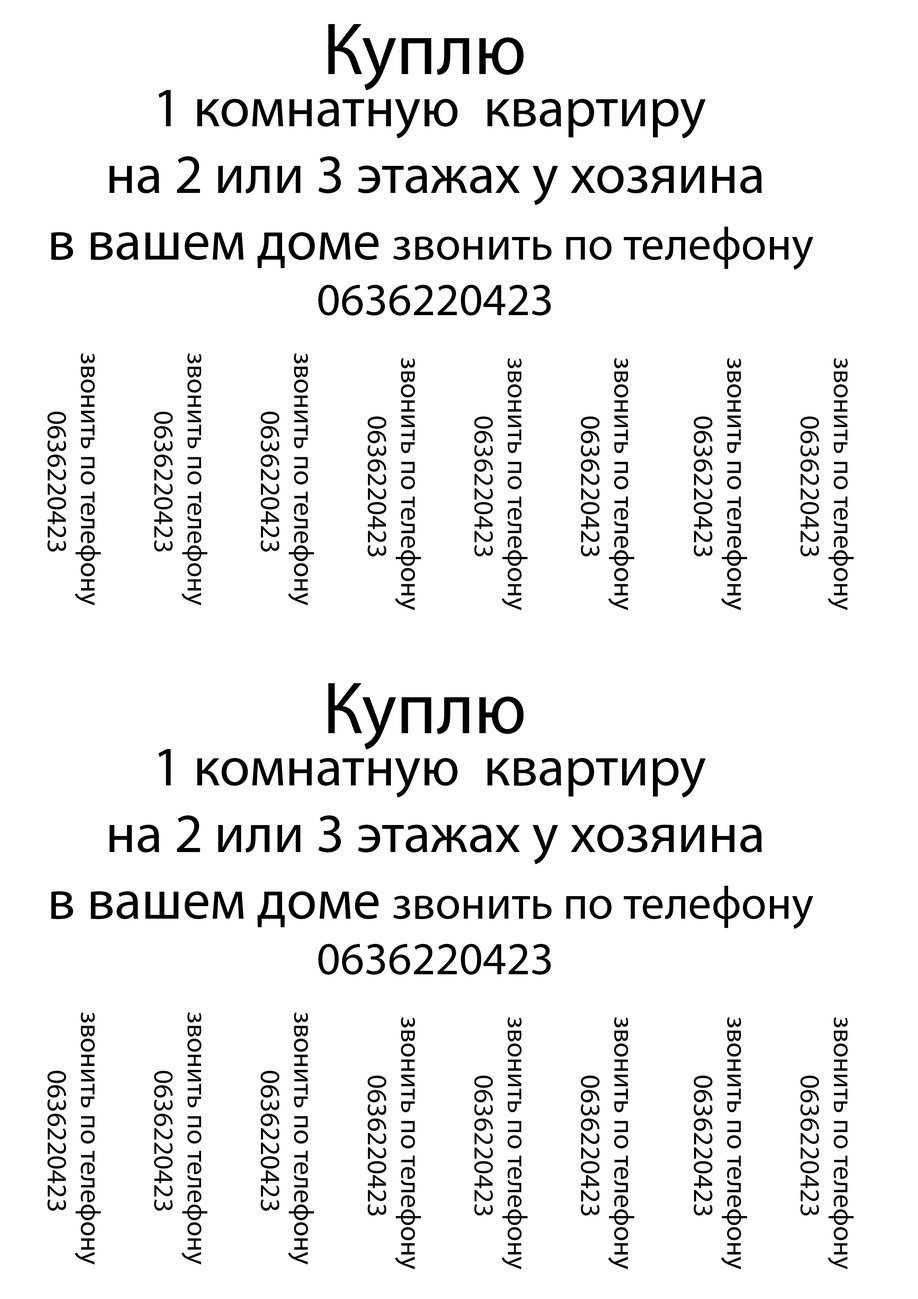
<style>
.page{position:relative;width:918px;height:1299px;background:#ffffff}
.page>*{position:absolute;margin:0}
.t1{font:74px "MyriadPro-Regular";color:#000000}
.t2{font:55.5px "MyriadPro-Regular";color:#000000}
.t3{font:46.3px "MyriadPro-Regular";color:#000000}
.t4{font:27.8px "MyriadPro-Regular";color:#000000}
</style>
<div class="page">
<p class="t1" style="left:328px;top:24px;width:196px;height:67px">Куплю</p>
<p class="t2" style="left:51px;top:90px;width:762px;height:226px;text-align:center">1 комнатную  квартиру <br>на 2 или 3 этажах у хозяина<br>в вашем доме <span class="t3">звонить по телефону <br>0636220423</span></p>
<p class="t4" style="left:154px;top:353px;width:54px;height:252px;text-align:center;rotate:90deg">звонить по телефону <br>0636220423</p>
<p class="t4" style="left:474px;top:358px;width:54px;height:252px;text-align:center;rotate:90deg">звонить по телефону <br>0636220423</p>
<p class="t4" style="left:800px;top:358px;width:54px;height:252px;text-align:center;rotate:90deg">звонить по телефону <br>0636220423</p>
<p class="t1" style="left:328px;top:683px;width:196px;height:67px">Куплю</p>
<p class="t2" style="left:51px;top:749px;width:762px;height:226px;text-align:center">1 комнатную  квартиру <br>на 2 или 3 этажах у хозяина<br>в вашем доме <span class="t3">звонить по телефону <br>0636220423</span></p>
<p class="t4" style="left:154px;top:1012px;width:54px;height:252px;text-align:center;rotate:90deg">звонить по телефону <br>0636220423</p>
<p class="t4" style="left:474px;top:1017px;width:54px;height:252px;text-align:center;rotate:90deg">звонить по телефону <br>0636220423</p>
<p class="t4" style="left:800px;top:1017px;width:54px;height:252px;text-align:center;rotate:90deg">звонить по телефону <br>0636220423</p>
</div>
